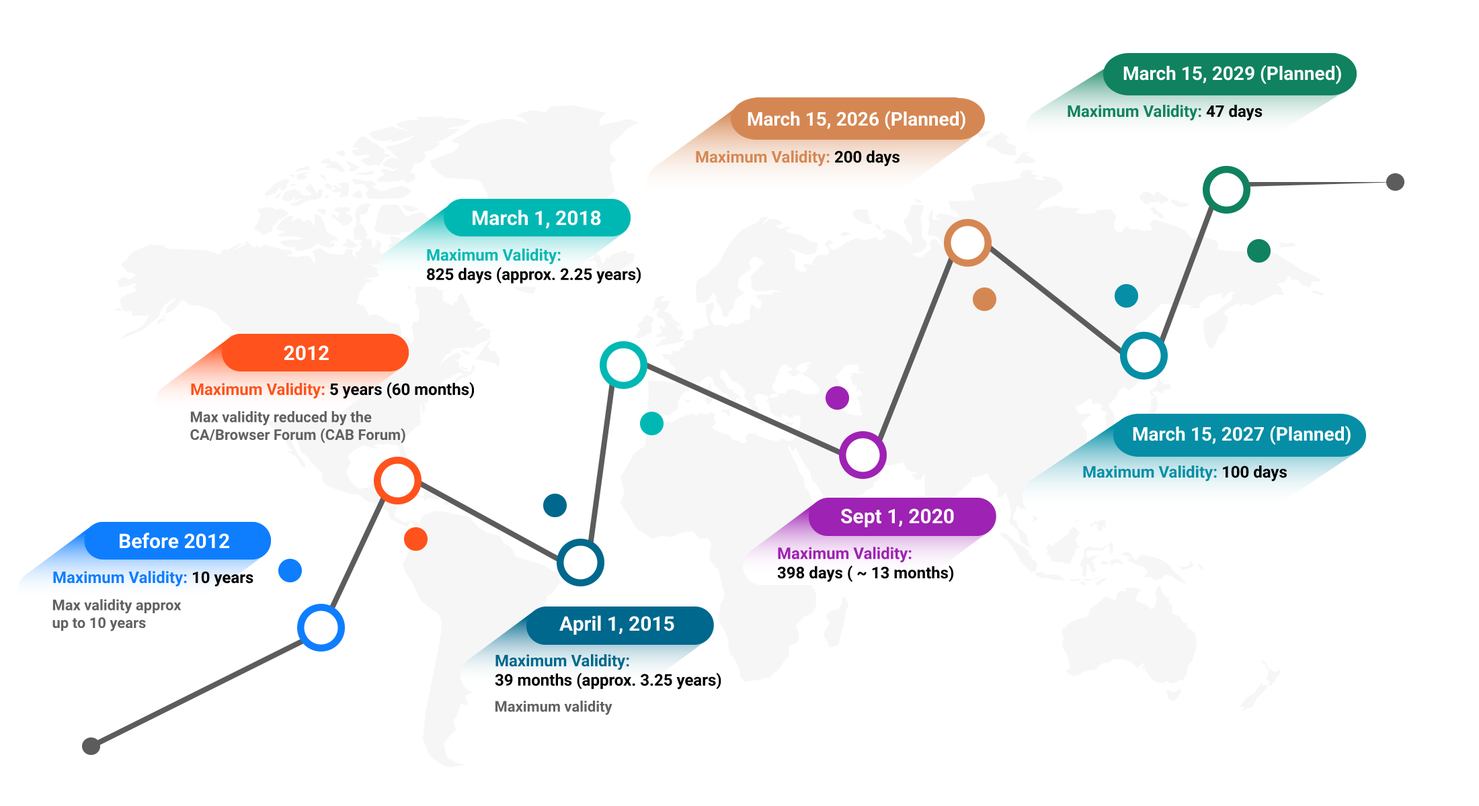
<style>
.page{position:relative;width:1479px;height:806px;background:#ffffff}
.page>*{position:absolute;margin:0}
.t1{font:18.8px "Roboto-Bold";color:#ffffff}
.t2{font:16.1px "Roboto-Bold";color:#10825f}
.t3{font:16.1px "Roboto-Bold";color:#000000}
.t4{font:16.1px "Roboto-Bold";color:#d58753}
.t5{font:20.2px "Roboto-Bold";color:#ffffff}
.t6{font:16.1px "Roboto-Bold";color:#00b8b3}
.t7{font:16.1px "Roboto-Bold";color:#ff521c}
.t8{font:14.8px "Roboto-Bold";color:#616161}
.t9{font:16.1px "Roboto-Bold";color:#058ea5}
.t10{font:16.1px "Roboto-Bold";color:#9e22b3}
.t11{font:16.1px "Roboto-Bold";color:#0e7eff}
.t12{font:16.1px "Roboto-Bold";color:#00688d}
</style>
<div class="page">
<p class="t1" style="left:1123px;top:65px;width:218px;height:20px">March 15, 2029 (Planned)</p>
<p class="t1" style="left:747px;top:111px;width:218px;height:19px">March 15, 2026 (Planned)</p>
<p class="t2" style="left:1067px;top:105px;width:195px;height:16px">Maximum Validity: <span class="t3">47 days</span></p>
<p class="t4" style="left:696px;top:151px;width:203px;height:16px">Maximum Validity: <span class="t3">200 days</span></p>
<p class="t5" style="left:472px;top:210px;width:129px;height:19px">March 1, 2018</p>
<p class="t3" style="left:427px;top:249px;width:213px;height:35px"><span class="t6">Maximum Validity: <br></span>825 days (approx. 2.25 years)</p>
<p class="t5" style="left:284px;top:345px;width:45px;height:16px">2012</p>
<p class="t3" style="left:191px;top:382px;width:283px;height:17px"><span class="t7">Maximum Validity: </span>5 years (60 months)</p>
<p class="t8" style="left:190px;top:411px;width:215px;height:33px">Max validity reduced by the <br>CA/Browser Forum (CAB Forum)</p>
<p class="t1" style="left:1132px;top:426px;width:218px;height:20px">March 15, 2027 (Planned)</p>
<p class="t9" style="left:1083px;top:466px;width:203px;height:16px">Maximum Validity: <span class="t3">100 days</span></p>
<p class="t5" style="left:841px;top:509px;width:113px;height:19px">Sept 1, 2020</p>
<p class="t5" style="left:120px;top:533px;width:109px;height:16px">Before 2012</p>
<p class="t3" style="left:777px;top:547px;width:177px;height:36px"><span class="t10">Maximum Validity: <br></span>398 days ( ~ 13 months)</p>
<p class="t11" style="left:53px;top:571px;width:200px;height:16px">Maximum Validity: <span class="t3">10 years</span></p>
<p class="t8" style="left:52px;top:599px;width:129px;height:33px">Max validity approx<br>up to 10 years</p>
<p class="t5" style="left:559px;top:616px;width:115px;height:19px">April 1, 2015</p>
<p class="t3" style="left:495px;top:655px;width:226px;height:35px"><span class="t12">Maximum Validity: <br></span>39 months (approx. 3.25 years)</p>
<p class="t8" style="left:495px;top:701px;width:117px;height:15px">Maximum validity</p>
</div>
